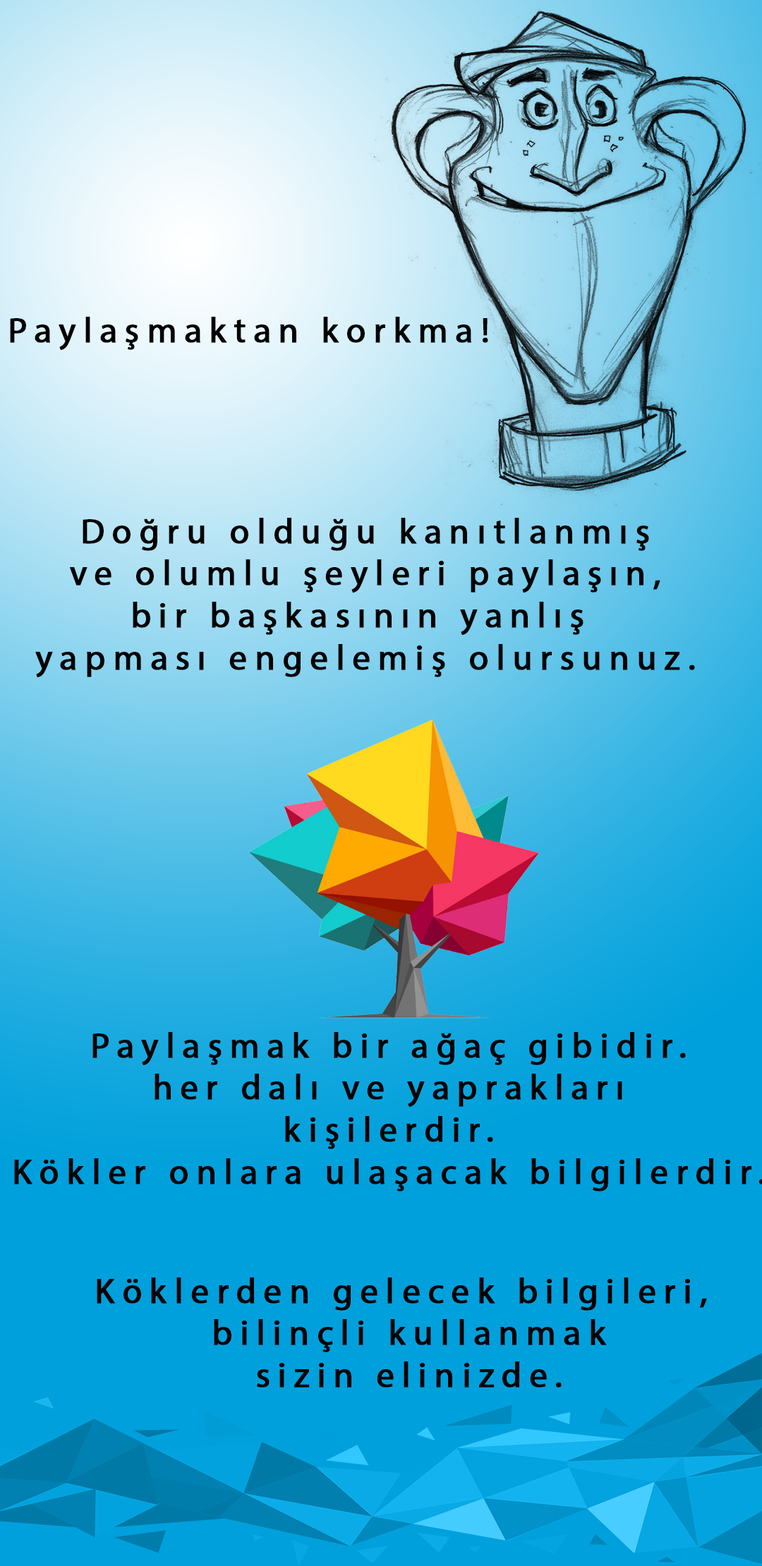
<style>
.page{position:relative;width:762px;height:1566px}
.page>*{position:absolute;margin:0}
.t1{font:35.3px "MyriadPro-Regular";letter-spacing:0.2em;color:#000000;font-weight:bold}
</style>
<div class="page">
<p class="t1" style="left:10px;top:317px;width:478px;height:33px">Paylaşmaktan korkma!</p>
<p class="t1" style="left:35px;top:518px;width:660px;height:159px;text-align:center">Doğru olduğu kanıtlanmış<br> ve olumlu şeyleri paylaşın, <br>bir başkasının yanlış <br>yapması engelemiş olursunuz.</p>
<p class="t1" style="left:97px;top:1277px;width:610px;height:110px;text-align:center">Köklerden gelecek bilgileri,<br> bilinçli kullanmak<br> sizin elinizde.</p>
</div>
